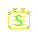
<style>
.page{position:relative;width:38px;height:38px;background:#ffffff}
.page>*{position:absolute;margin:0}
.t1{font:18px "Calibri";color:#47ff56}
</style>
<div class="page">
<p class="t1" style="left:15px;top:15px;width:8px;height:11px">S</p>
</div>
